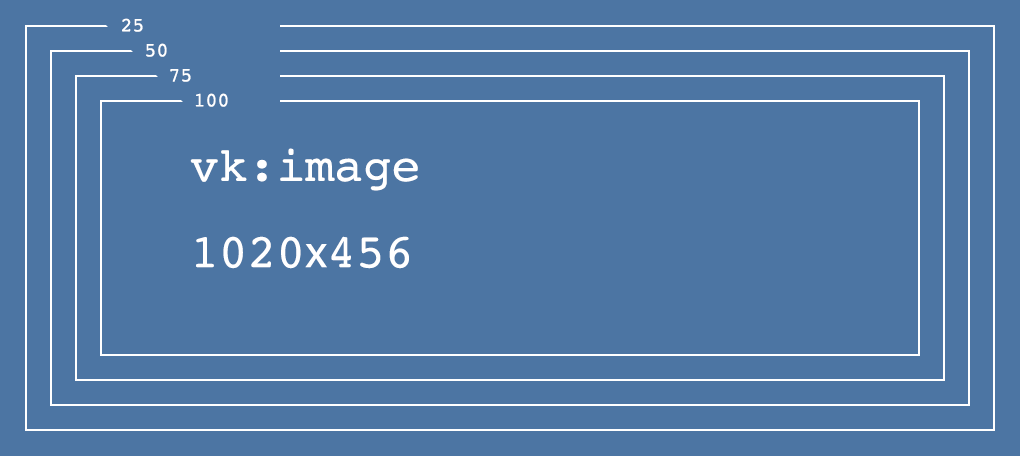
<style>
.page{position:relative;width:1020px;height:456px;background:#4c75a3}
.page>*{position:absolute;margin:0}
.t1{font:20px "Courier";color:#ffffff}
.t2{font:48px "Courier";color:#ffffff}
.t3{font:48px "MyriadPro-Regular";color:#ffffff}
</style>
<div class="page">
<p class="t1" style="left:122px;top:18px;width:21px;height:14px">25</p>
<p class="t1" style="left:146px;top:43px;width:21px;height:14px">50</p>
<p class="t1" style="left:170px;top:69px;width:21px;height:13px">75</p>
<p class="t1" style="left:195px;top:93px;width:33px;height:14px">100</p>
<p class="t2" style="left:190px;top:148px;width:228px;height:121px">vk:image<br>1020<span class="t3">х</span>456</p>
</div>
